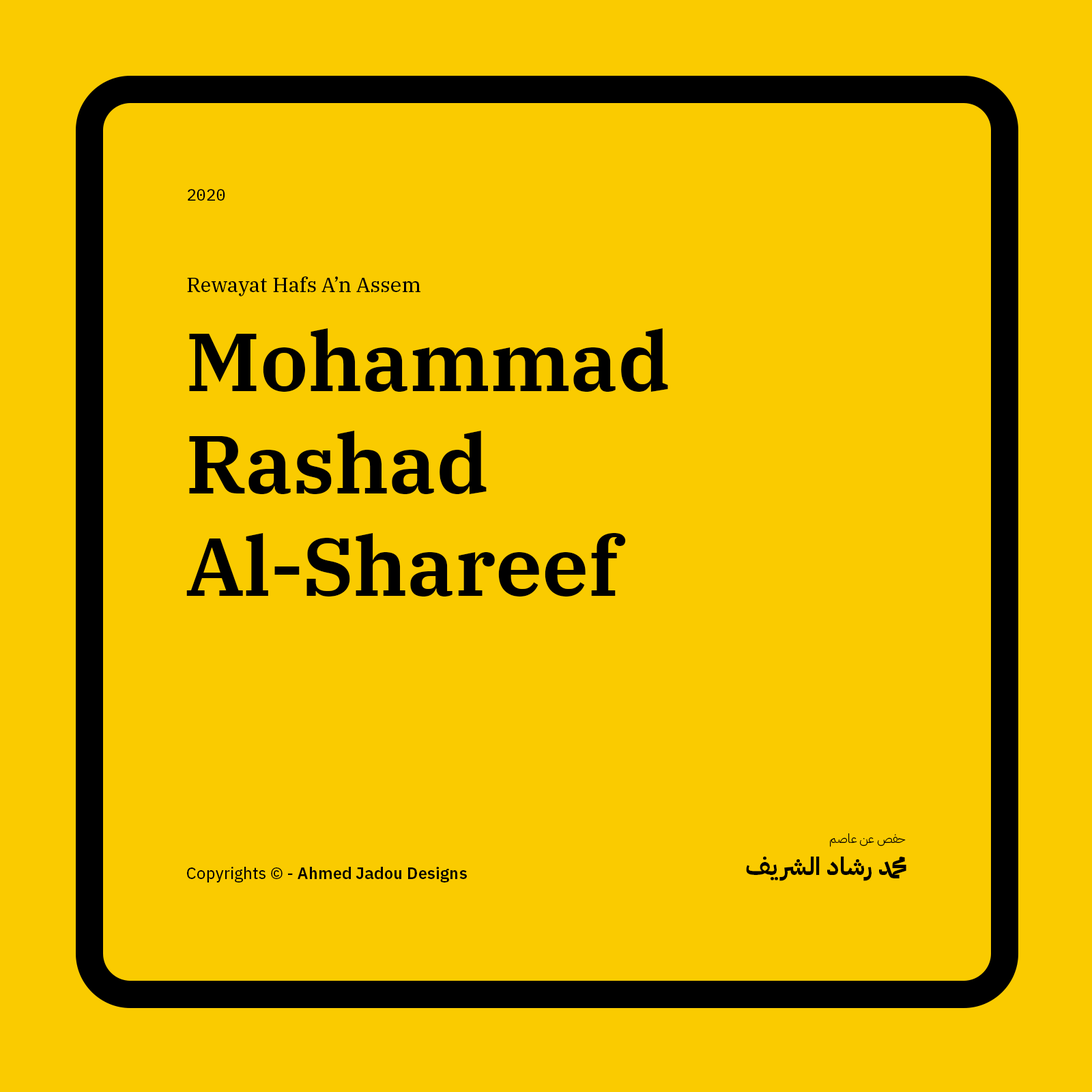
<style>
.page{position:relative;width:1092px;height:1092px;background:#facb00}
.page>*{position:absolute;margin:0}
.t1{font:16.4px "IBMPlexMono-Text";color:#000000}
.t2{font:20.5px "IBMPlexSerif-Text";color:#000000}
.t3{font:81.9px/102.7px "IBMPlexSerif-SemiBold";color:#000000}
.t4{font:12.3px "IBMPlexArabic-Light";color:#000000}
.t5{font:24.6px "IBMPlexArabic-Bold";color:#000000}
.t6{font:16.4px "IBMPlexSans-SemiBold";color:#000000}
.t7{font:16.4px "IBMPlexSans-Text";color:#000000}
</style>
<div class="page">
<p class="t1" style="left:188px;top:189px;width:37px;height:12px">2020</p>
<p class="t2" style="left:187px;top:276px;width:233px;height:20px">Rewayat Hafs A’n Assem</p>
<p class="t3" style="left:186px;top:328px;width:482px;height:268px">Mohammad Rashad Al-Shareef</p>
<p class="t4" style="left:830px;top:833px;width:76px;height:14px">حفص عن عاصم</p>
<p class="t5" style="left:746px;top:857px;width:160px;height:24px">محمد رشاد الشريف</p>
<p class="t6" style="left:187px;top:867px;width:280px;height:15px"><span class="t7">Copyrights © - </span>Ahmed Jadou Designs</p>
</div>
